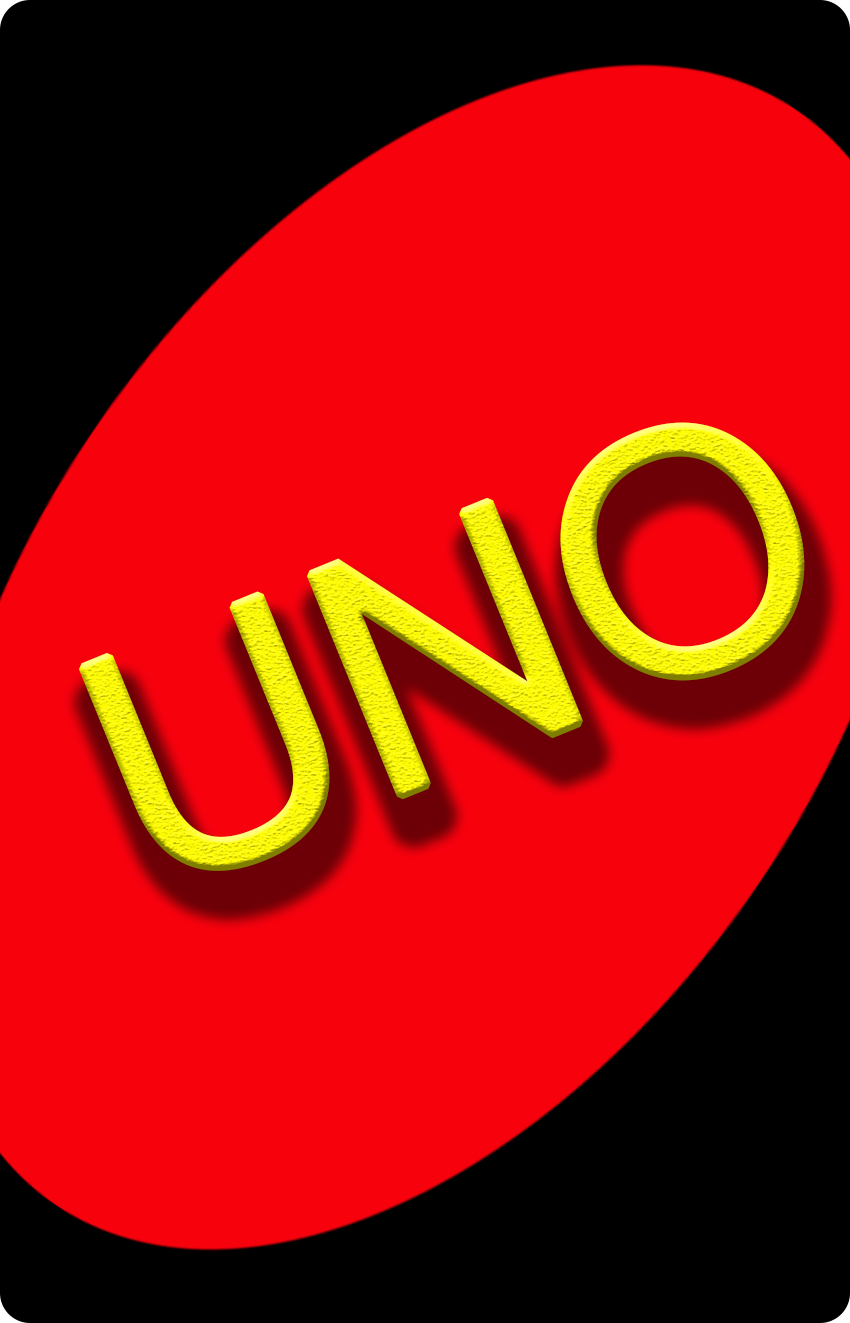
<style>
.page{position:relative;width:850px;height:1323px;background:#f7010d}
.page>*{position:absolute;margin:0}
.t1{font:333.3px "PingFangSC-Regular";font-weight:bold}
</style>
<div class="page">
<p class="t1" style="left:79px;top:422px;width:726px;height:449px;rotate:-22deg">UNO</p>
</div>
